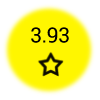
<style>
.page{position:relative;width:100px;height:100px;background:#fff600}
.page>*{position:absolute;margin:0}
.t1{font:36px "RobotoSlab-Regular";color:#000000}
</style>
<div class="page">
<p class="t1" style="left:31px;top:27px;width:38px;height:16px">3.93</p>
</div>
